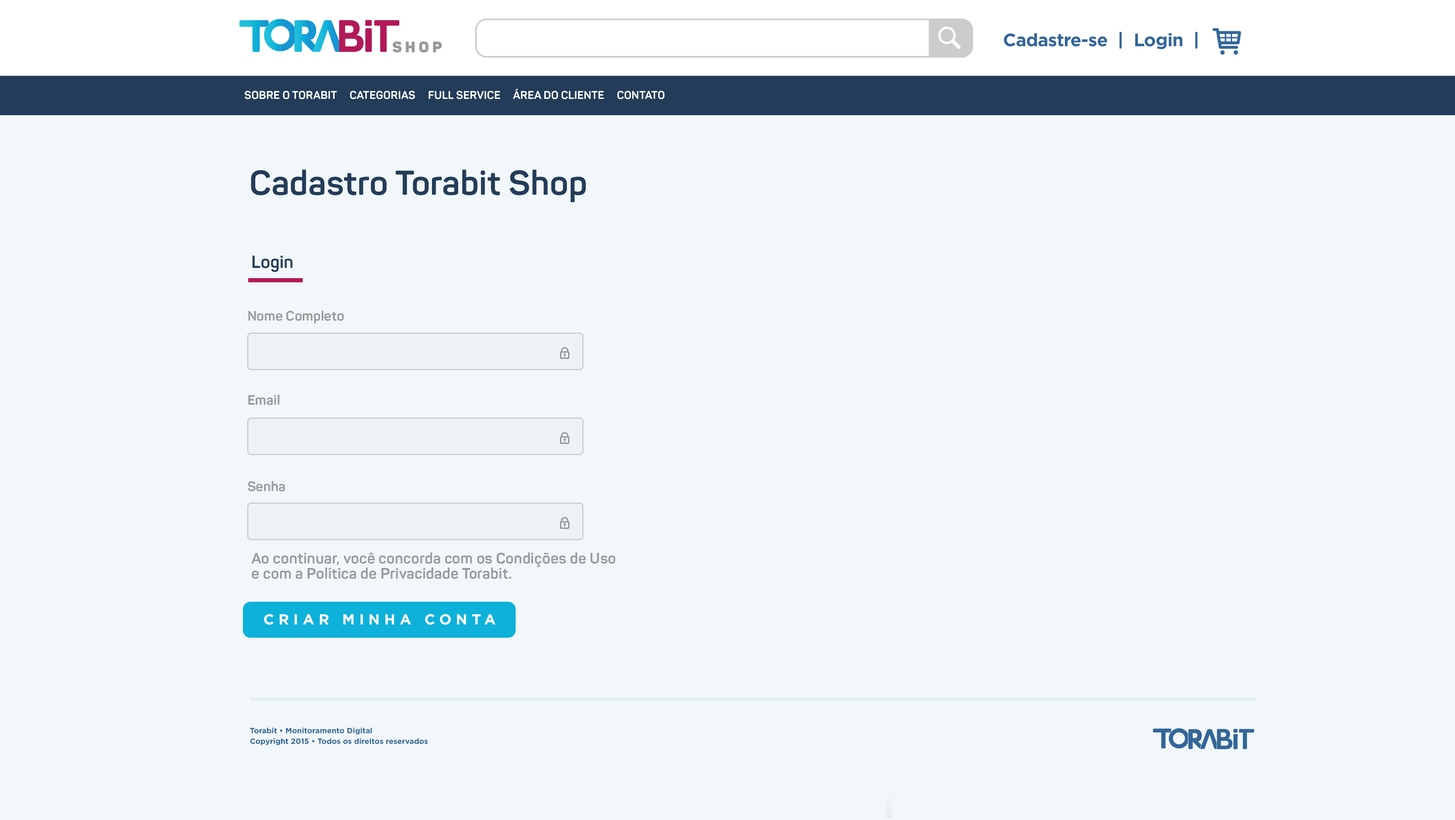
<style>
.page{position:relative;width:1455px;height:820px;background:#f1f7fa}
.page>*{position:absolute;margin:0}
.t1{font:15px "Panton-Black";letter-spacing:0.21em;color:#999999}
.t2{font:18px "Gotham-Bold";letter-spacing:-0.02em;color:#336699}
.t3{font:11px "Panton-Bold";letter-spacing:0.01em;color:#ffffff;text-transform:uppercase}
.t4{font:34px "Panton-Bold";letter-spacing:0.01em;color:#233c59}
.t5{font:17.3px "Panton-Bold";letter-spacing:0.01em;color:#233c59}
.t6{font:13.5px "Panton-Bold";letter-spacing:0.01em;color:#999999}
.t7{font:15px/15.2px "Panton-Bold";letter-spacing:0.01em;color:#999999}
.t8{font:14.5px "Gotham-Bold";letter-spacing:0.3em;color:#ffffff}
.t9{font:7.5px "Gotham-Bold";color:#336699}
</style>
<div class="page">
<p class="t1" style="left:392px;top:41px;width:50px;height:12px">SHOP</p>
<p class="t2" style="left:1003px;top:32px;width:194px;height:17px">Cadastre-se  |  Login  |</p>
<p class="t3" style="left:244px;top:89px;width:420px;height:10px">Sobre o Torabit     Categorias     FULL SERVICE     Área do cliente     Contato</p>
<p class="t4" style="left:251px;top:169px;width:335px;height:33px">Cadastro Torabit Shop</p>
<p class="t5" style="left:252px;top:255px;width:40px;height:17px">Login</p>
<p class="t6" style="left:248px;top:310px;width:96px;height:14px">Nome Completo</p>
<p class="t6" style="left:248px;top:394px;width:32px;height:11px">Email</p>
<p class="t6" style="left:248px;top:481px;width:37px;height:10px">Senha</p>
<p class="t7" style="left:251px;top:552px;width:364px;height:27px">Ao continuar, você concorda com os Condições de Uso<br>e com a Política de Privacidade Torabit.</p>
<p class="t8" style="left:264px;top:614px;width:231px;height:11px">CRIAR MINHA CONTA</p>
<p class="t9" style="left:250px;top:738px;width:178px;height:7px">Copyright 2015 • Todos os direitos reservados</p>
<p class="t9" style="left:250px;top:727px;width:122px;height:8px">Torabit • Monitoramento Digital</p>
</div>
